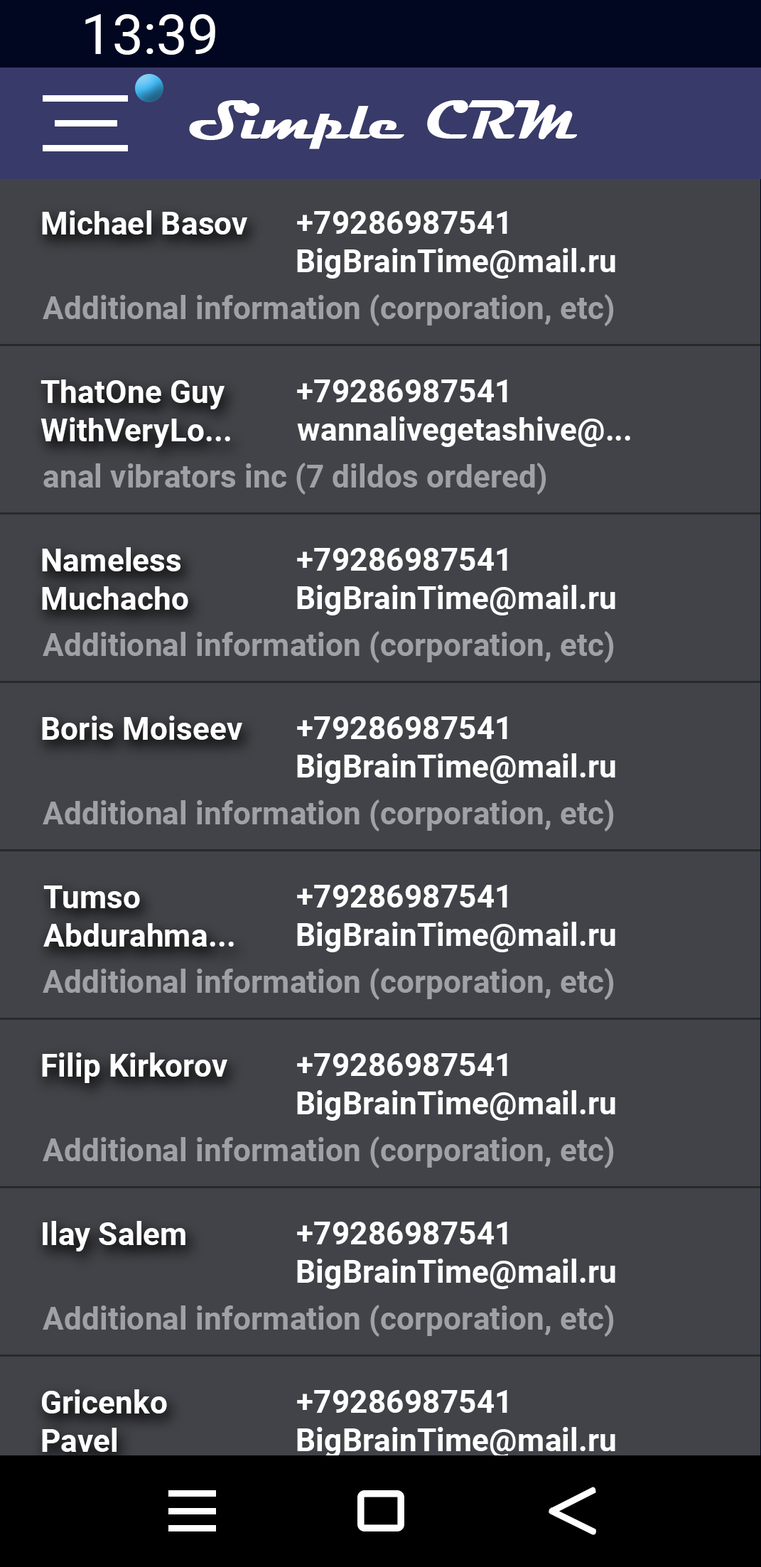
<style>
.page{position:relative;width:761px;height:1567px;background:#424348}
.page>*{position:absolute;margin:0}
.t1{font:55.3px "Roboto-Regular";color:#ffffff}
.t2{font:55.3px "Magneto-Bold";color:#ffffff}
.t3{font:31.6px "Roboto-Bold";color:#ffffff}
.t4{font:31.6px "Roboto-Bold";color:#a0a1a7}
</style>
<div class="page">
<p class="t1" style="left:85px;top:14px;width:130px;height:41px">13:39</p>
<p class="t2" style="left:189px;top:100px;width:388px;height:49px">Simple CRM</p>
<p class="t3" style="left:42px;top:210px;width:205px;height:24px">Michael Basov</p>
<p class="t3" style="left:297px;top:211px;width:210px;height:23px">+79286987541</p>
<p class="t3" style="left:297px;top:248px;width:318px;height:31px">BigBrainTime@mail.ru</p>
<p class="t4" style="left:43px;top:294px;width:571px;height:32px">Additional information (corporation, etc)</p>
<p class="t3" style="left:41px;top:379px;width:189px;height:69px">ThatOne Guy<br>WithVeryLo...</p>
<p class="t3" style="left:297px;top:379px;width:210px;height:23px">+79286987541</p>
<p class="t3" style="left:297px;top:416px;width:333px;height:31px">wannalivegetashive@...</p>
<p class="t4" style="left:43px;top:463px;width:503px;height:32px">anal vibrators inc (7 dildos ordered)</p>
<p class="t3" style="left:42px;top:547px;width:146px;height:63px">Nameless <br>Muchacho</p>
<p class="t3" style="left:297px;top:548px;width:210px;height:23px">+79286987541</p>
<p class="t3" style="left:297px;top:585px;width:318px;height:30px">BigBrainTime@mail.ru</p>
<p class="t4" style="left:43px;top:631px;width:571px;height:32px">Additional information (corporation, etc)</p>
<p class="t3" style="left:42px;top:716px;width:200px;height:24px">Boris Moiseev</p>
<p class="t3" style="left:297px;top:716px;width:210px;height:23px">+79286987541</p>
<p class="t3" style="left:297px;top:753px;width:318px;height:31px">BigBrainTime@mail.ru</p>
<p class="t4" style="left:43px;top:799px;width:571px;height:32px">Additional information (corporation, etc)</p>
<p class="t3" style="left:43px;top:885px;width:191px;height:62px">Tumso<br>Abdurahma...</p>
<p class="t3" style="left:297px;top:885px;width:210px;height:22px">+79286987541</p>
<p class="t3" style="left:297px;top:922px;width:318px;height:30px">BigBrainTime@mail.ru</p>
<p class="t4" style="left:43px;top:968px;width:571px;height:32px">Additional information (corporation, etc)</p>
<p class="t3" style="left:42px;top:1052px;width:185px;height:31px">Filip Kirkorov</p>
<p class="t3" style="left:297px;top:1053px;width:210px;height:23px">+79286987541</p>
<p class="t3" style="left:297px;top:1090px;width:318px;height:31px">BigBrainTime@mail.ru</p>
<p class="t4" style="left:43px;top:1136px;width:571px;height:32px">Additional information (corporation, etc)</p>
<p class="t3" style="left:43px;top:1221px;width:142px;height:30px">Ilay Salem</p>
<p class="t3" style="left:297px;top:1222px;width:210px;height:22px">+79286987541</p>
<p class="t3" style="left:297px;top:1258px;width:318px;height:31px">BigBrainTime@mail.ru</p>
<p class="t4" style="left:43px;top:1305px;width:571px;height:32px">Additional information (corporation, etc)</p>
<p class="t3" style="left:42px;top:1389px;width:125px;height:63px">Gricenko <br>Pavel</p>
<p class="t3" style="left:297px;top:1390px;width:210px;height:23px">+79286987541</p>
<p class="t3" style="left:297px;top:1427px;width:318px;height:30px">BigBrainTime@mail.ru</p>
</div>
